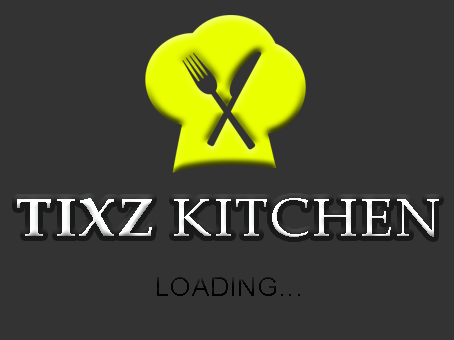
<style>
.page{position:relative;width:454px;height:340px;background:#333333}
.page>*{position:absolute;margin:0}
.t1{font:54px "BookAntiqua";letter-spacing:0.05em;color:#ffffff}
.t2{font:54px "BookAntiqua-Bold";letter-spacing:0.05em;color:#feffff}
.t3{font:26px "ArialMT";letter-spacing:0.05em;color:#000000}
</style>
<div class="page">
<p class="t1" style="left:17px;top:198px;width:422px;height:39px"><span class="t2">TIXZ </span>KITCHEN</p>
<p class="t3" style="left:157px;top:277px;width:143px;height:19px">LOADING...</p>
</div>
